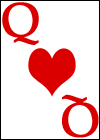
<style>
.page{position:relative;width:100px;height:140px;background:#ffffff}
.page>*{position:absolute;margin:0}
.t1{font:48px "PalatinoLinotype-Roman";color:#da0000;font-weight:bold}
</style>
<div class="page">
<p class="t1" style="left:2px;top:2px;width:37px;height:43px">Q</p>
<p class="t1" style="left:62px;top:94px;width:37px;height:44px;rotate:180deg">Q</p>
</div>
